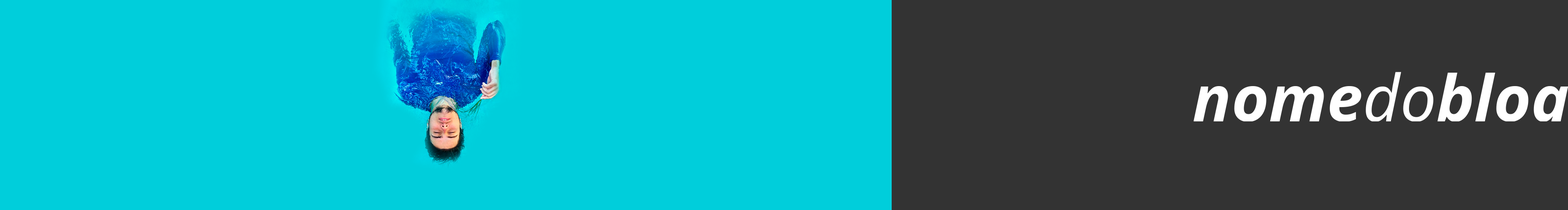
<style>
.page{position:relative;width:1568px;height:210px;background:#00cedb}
.page>*{position:absolute;margin:0}
.t1{font:64.2px "NotoSans-BoldItalic";color:#ffffff}
.t2{font:64.2px "NotoSans-Italic";color:#ffffff}
</style>
<div class="page">
<p class="t1" style="left:1193px;top:72px;width:375px;height:65px">nome<span class="t2">do</span>blog</p>
</div>
